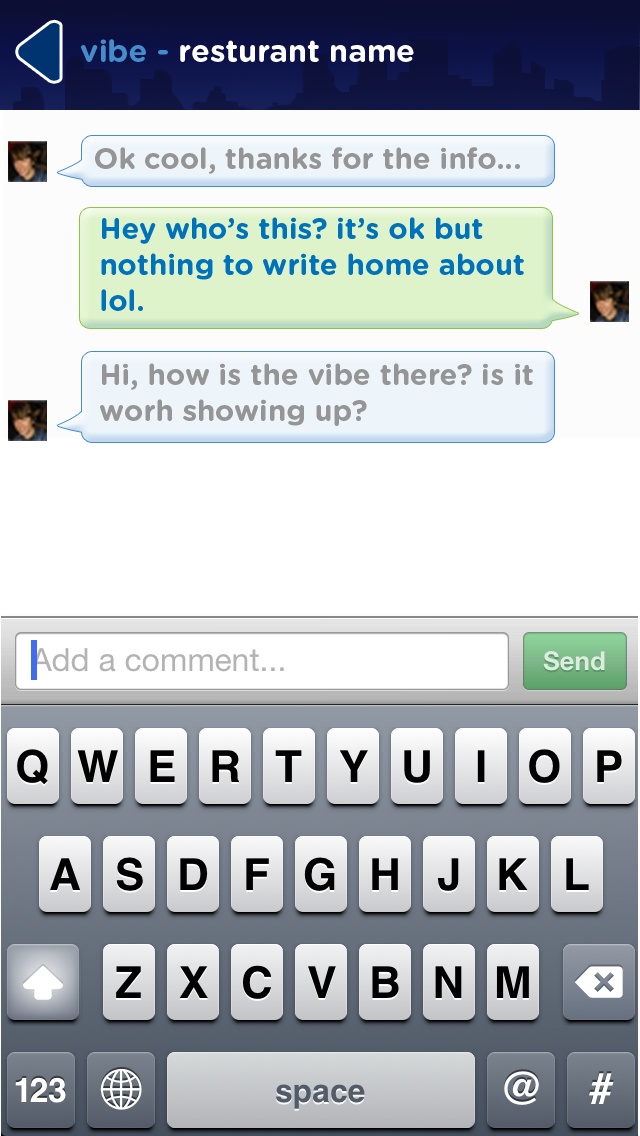
<style>
.page{position:relative;width:640px;height:1136px}
.page>*{position:absolute;margin:0}
.t1{font:30.9px "GothamRounded-Bold";color:#ffffff}
.t2{font:30.9px "GothamRounded-Bold";color:#448ccb}
.t3{font:29.2px "GothamRounded-Bold";color:#959595}
.t4{font:29.2px/36px "GothamRounded-Bold";color:#0072bc}
.t5{font:29.2px/36px "GothamRounded-Bold";color:#959595}
</style>
<div class="page">
<p class="t1" style="left:81px;top:39px;width:333px;height:23px"><span class="t2">vibe - </span>resturant name</p>
<p class="t3" style="left:95px;top:147px;width:425px;height:27px">Ok cool, thanks for the info...</p>
<p class="t4" style="left:101px;top:217px;width:423px;height:94px">Hey who’s this? it’s ok but <br>nothing to write home about <br>lol.</p>
<p class="t5" style="left:100px;top:363px;width:433px;height:63px">Hi, how is the vibe there? is it <br>worh showing up?</p>
</div>
